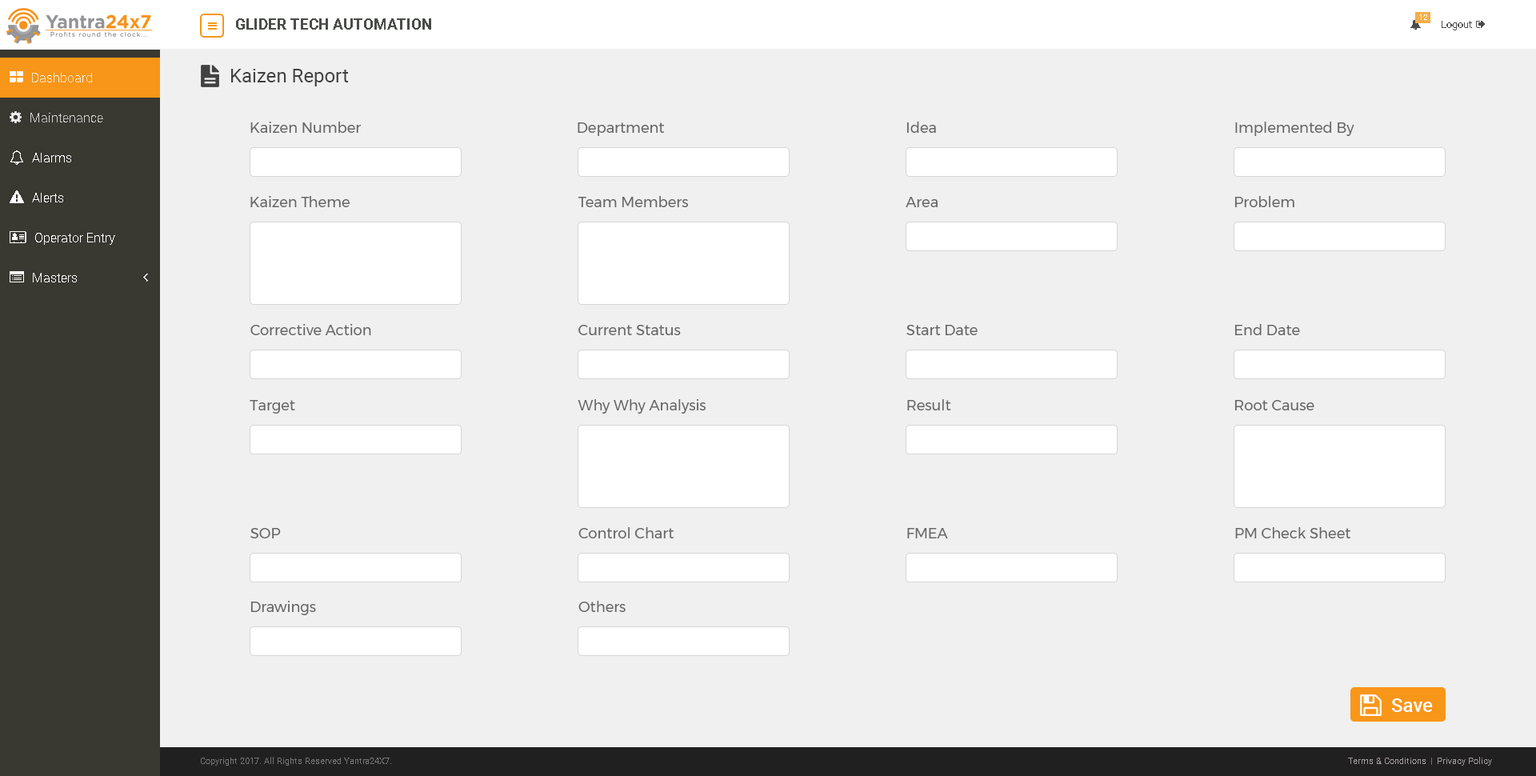
<style>
.page{position:relative;width:1536px;height:776px;background:#f0f0f0}
.page>*{position:absolute;margin:0}
.t1{font:19.2px "Roboto-Regular";color:#424142}
.t2{font:14.4px "Montserrat-Regular";color:#666666}
.t3{font:19.2px "Roboto-Medium";color:#ffffff}
</style>
<div class="page">
<p class="t1" style="left:231px;top:69px;width:117px;height:17px">Kaizen Report</p>
<p class="t2" style="left:250px;top:122px;width:112px;height:11px">Kaizen Number</p>
<p class="t2" style="left:578px;top:122px;width:86px;height:14px">Department</p>
<p class="t2" style="left:907px;top:122px;width:29px;height:11px">Idea</p>
<p class="t2" style="left:1235px;top:122px;width:120px;height:14px">Implemented By</p>
<p class="t2" style="left:250px;top:196px;width:100px;height:11px">Kaizen Theme</p>
<p class="t2" style="left:578px;top:196px;width:110px;height:11px">Team Members</p>
<p class="t2" style="left:906px;top:197px;width:32px;height:10px">Area</p>
<p class="t2" style="left:1235px;top:196px;width:60px;height:11px">Problem</p>
<p class="t2" style="left:250px;top:324px;width:121px;height:11px">Corrective Action</p>
<p class="t2" style="left:579px;top:325px;width:102px;height:10px">Current Status</p>
<p class="t2" style="left:907px;top:325px;width:71px;height:10px">Start Date</p>
<p class="t2" style="left:1235px;top:324px;width:65px;height:11px">End Date</p>
<p class="t2" style="left:250px;top:400px;width:45px;height:14px">Target</p>
<p class="t2" style="left:578px;top:399px;width:128px;height:15px">Why Why Analysis</p>
<p class="t2" style="left:907px;top:399px;width:44px;height:11px">Result</p>
<p class="t2" style="left:1235px;top:400px;width:80px;height:10px">Root Cause</p>
<p class="t2" style="left:250px;top:528px;width:31px;height:11px">SOP</p>
<p class="t2" style="left:579px;top:527px;width:95px;height:12px">Control Chart</p>
<p class="t2" style="left:907px;top:528px;width:41px;height:11px">FMEA</p>
<p class="t2" style="left:1235px;top:527px;width:116px;height:12px">PM Check Sheet</p>
<p class="t2" style="left:250px;top:601px;width:66px;height:14px">Drawings</p>
<p class="t2" style="left:579px;top:601px;width:47px;height:11px">Others</p>
<p class="t3" style="left:1391px;top:699px;width:42px;height:13px">Save</p>
</div>
